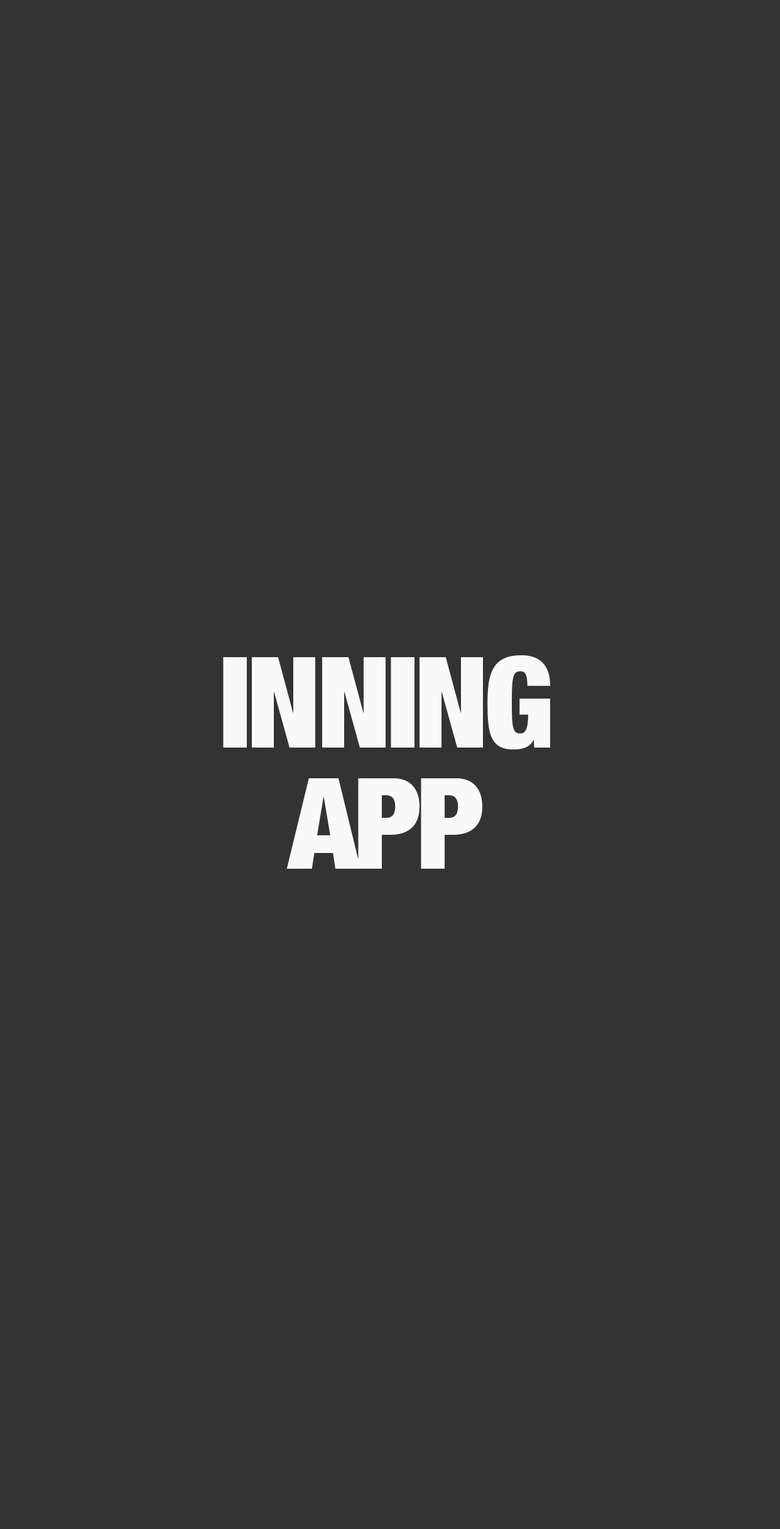
<style>
.page{position:relative;width:780px;height:1529px;background:#333333}
.page>*{position:absolute;margin:0}
.t1{font:126.5px/120.9px "HelveticaNeue-BlackCond";letter-spacing:-0.04em;color:#f9f9f9}
</style>
<div class="page">
<p class="t1" style="left:223px;top:655px;width:327px;height:214px;text-align:center">INNING<br>APP</p>
</div>
